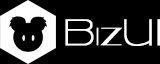
<style>
.page{position:relative;width:160px;height:64px;background:#000000}
.page>*{position:absolute;margin:0}
.t1{font:24px "Kilsonburg-Regular";color:#ffffff;font-weight:bold}
.t2{font:36px "Kilsonburg-Regular";color:#ffffff;font-weight:bold}
</style>
<div class="page">
<p class="t1" style="left:65px;top:19px;width:95px;height:27px"><span class="t2">B</span>iz<span class="t2">UI</span></p>
</div>
